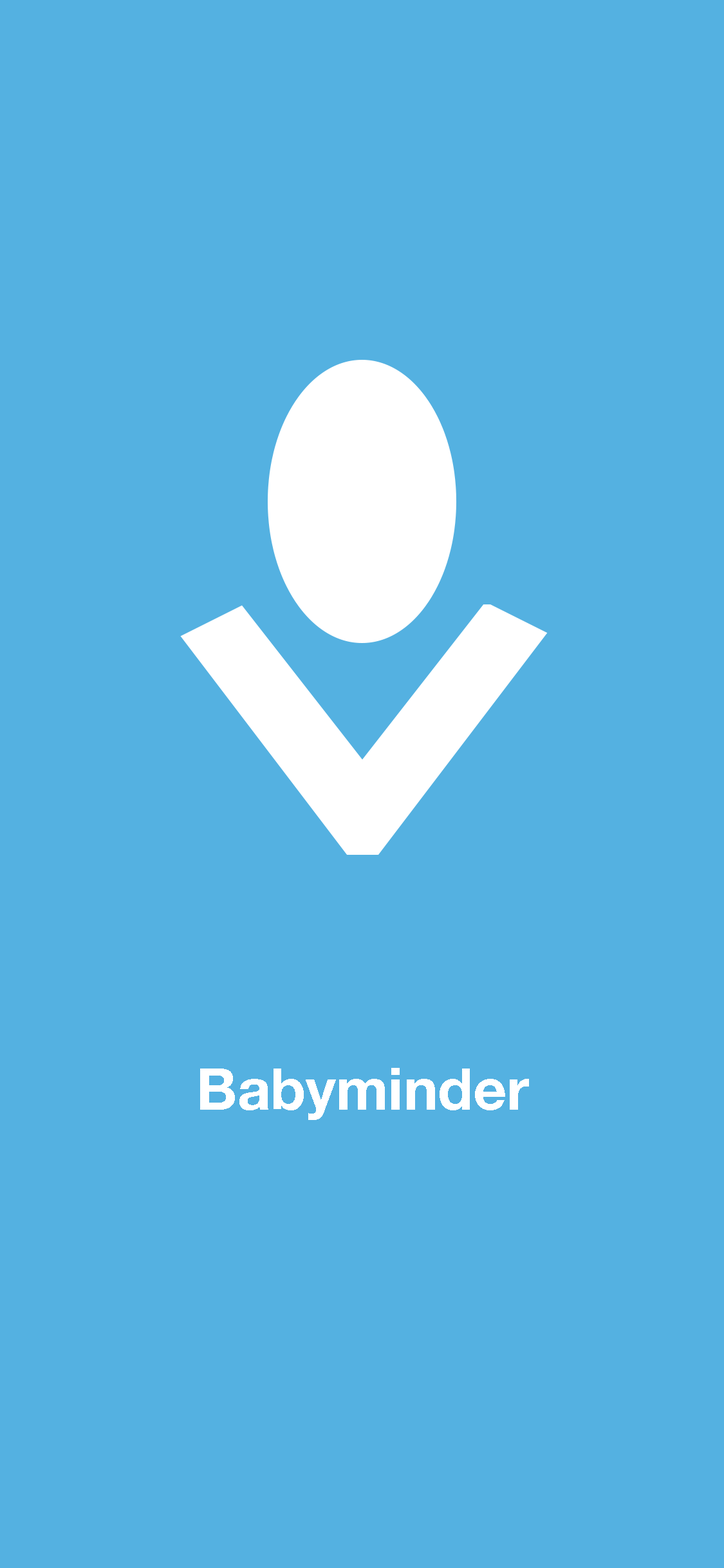
<style>
.page{position:relative;width:724px;height:1568px;background:#54b1e1}
.page>*{position:absolute;margin:0}
.t1{font:57.9px "HelveticaNeue-Bold";color:#ffffff}
</style>
<div class="page">
<p class="t1" style="left:200px;top:1068px;width:329px;height:52px">Babyminder</p>
</div>
